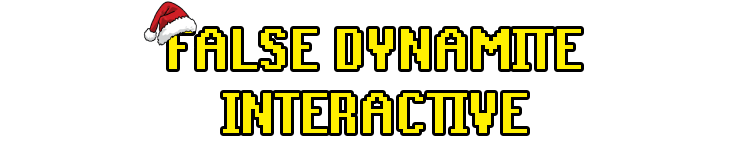
<style>
.page{position:relative;width:750px;height:158px;background:#ffffff}
.page>*{position:absolute;margin:0}
.t1{font:64px "RuneScape-Chat-Bold-2";color:#fff000}
</style>
<div class="page">
<p class="t1" style="left:169px;top:29px;width:412px;height:40px">FALSE DYNAMITE</p>
<p class="t1" style="left:223px;top:93px;width:304px;height:40px">INTERACTIVE</p>
</div>
